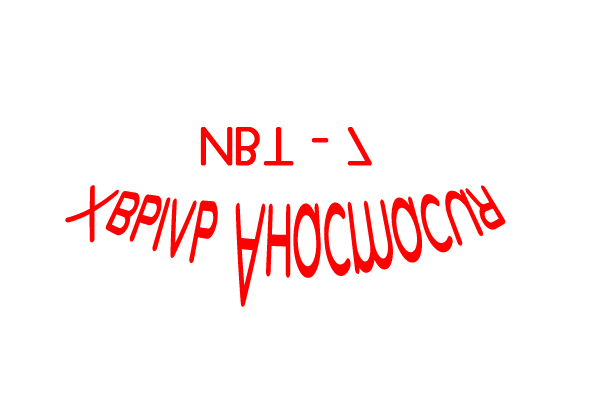
<style>
.page{position:relative;width:600px;height:400px;background:#ffffff}
.page>*{position:absolute;margin:0}
.t1{font:48px "Comfortaa";color:#ff0000;font-weight:bold}
.t2{font:48px "Comfortaa";color:#ff0000}
</style>
<div class="page">
<p class="t1" style="left:200px;top:127px;width:172px;height:39px">ИВТ - 7</p>
<p class="t2" style="left:65px;top:185px;width:441px;height:122px">Хвыль Анастасия</p>
</div>
